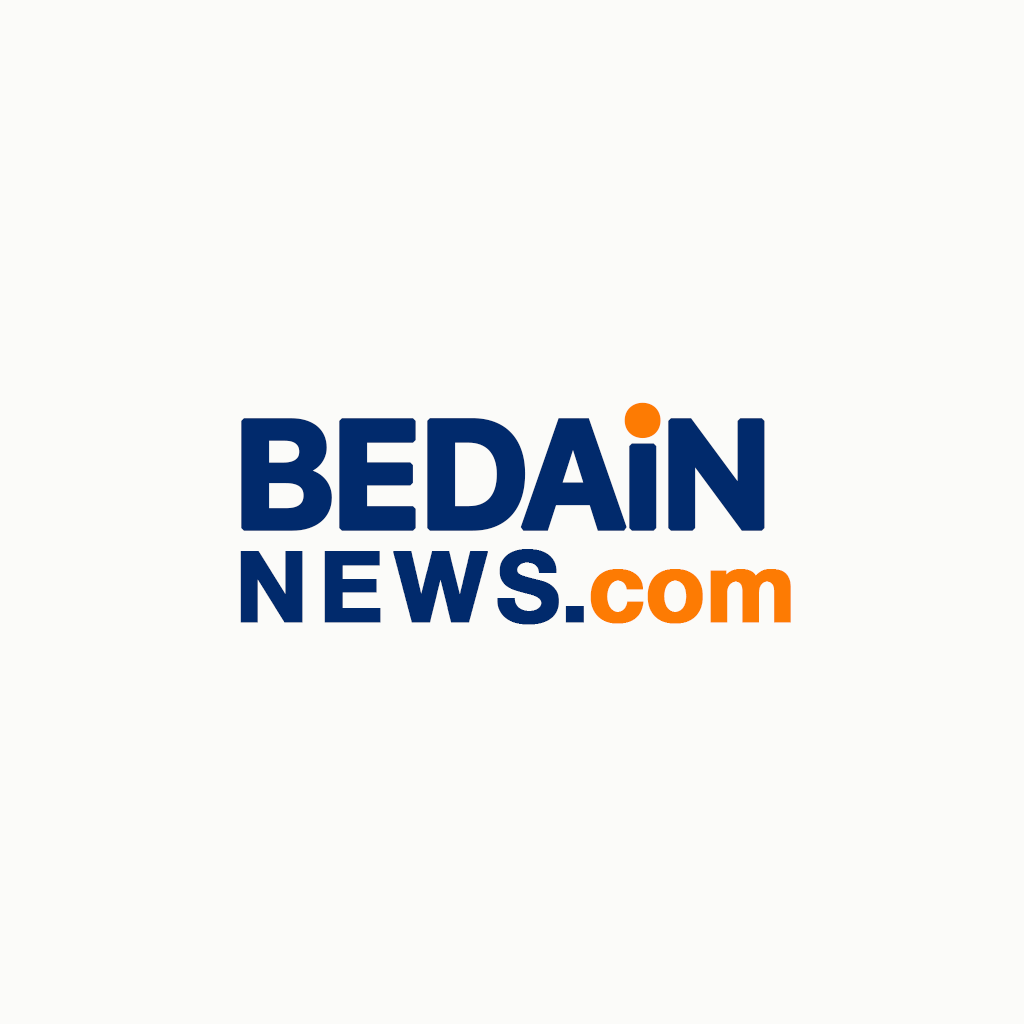
<style>
.page{position:relative;width:1024px;height:1024px;background:#fbfbf9}
.page>*{position:absolute;margin:0}
.t1{font:151.6px "Galvji-Bold";letter-spacing:-0.05em;color:#012a6c;font-weight:bold}
.t2{font:176.2px "Galvji-Bold";letter-spacing:-0.05em;color:#fd7b03;font-weight:bold}
.t3{font:97.6px "HelveticaNeue-Bold";letter-spacing:0.1em;color:#012a6c;font-weight:bold}
.t4{font:97.6px "HelveticaNeue-Bold";color:#012a6c;font-weight:bold}
.t5{font:97.6px "HelveticaNeue-Bold";color:#fd7b03;font-weight:bold}
</style>
<div class="page">
<p class="t1" style="left:241px;top:410px;width:524px;height:121px">BEDAiN</p>
<p class="t2" style="left:624px;top:402px;width:37px;height:37px">.</p>
<p class="t3" style="left:240px;top:549px;width:551px;height:76px">NEW<span class="t4">S.</span><span class="t5">com</span></p>
</div>
